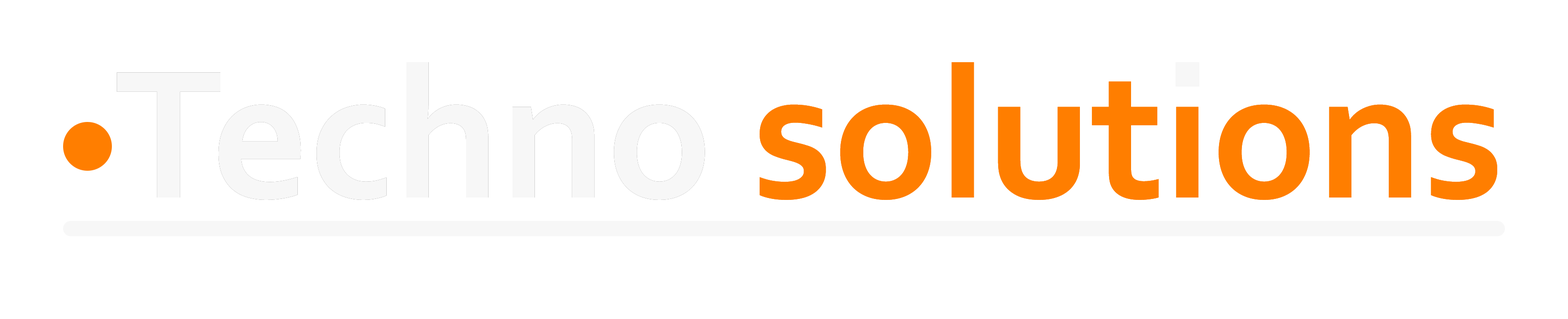
<style>
.page{position:relative;width:1568px;height:319px;background:#ffffff}
.page>*{position:absolute;margin:0}
.t1{font:191.2px "Corbel-Bold"}
.t2{font:191.2px "Corbel-Bold";color:#ff7e00}
.t3{font:191.2px "Corbel-Bold";color:#f7f7f7}
</style>
<div class="page">
<p class="t1" style="left:117px;top:62px;width:1380px;height:138px">Techno solutions</p>
<p class="t2" style="left:117px;top:62px;width:1380px;height:138px"><span class="t3">Techno </span>solutions</p>
</div>
